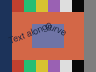
<style>
.page{position:relative;width:96px;height:72px;background:#d36747}
.page>*{position:absolute;margin:0}
.t1{font:9px "Helvetica";color:#16253f}
</style>
<div class="page">
<p class="t1" style="left:8px;top:22px;width:58px;height:22px">Text along a curve</p>
</div>
